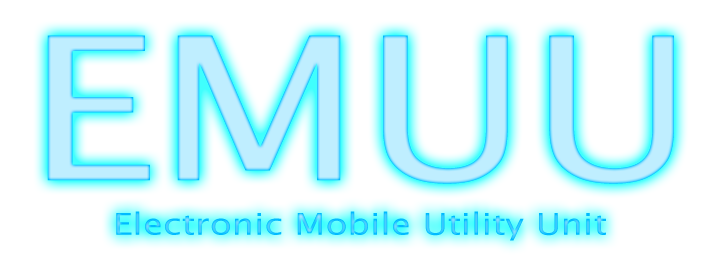
<style>
.page{position:relative;width:720px;height:256px;background:#ffffff}
.page>*{position:absolute;margin:0}
.t1{font:200px "LucidaSans";color:#bfeeff;scale:1.2 1}
.t2{font:30px "LucidaSans";scale:1.2 1}
</style>
<div class="page">
<p class="t1" style="left:47px;top:35px;width:627px;height:149px">EMUU</p>
<p class="t2" style="left:116px;top:211px;width:490px;height:30px">Electronic Mobile Utility Unit</p>
</div>
